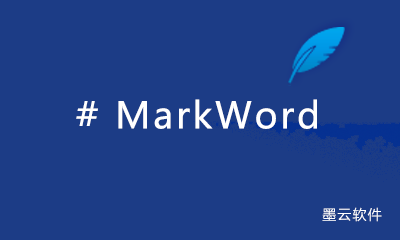
<style>
.page{position:relative;width:400px;height:240px;background:#1c3c86}
.page>*{position:absolute;margin:0}
.t1{font:36px "MicrosoftYaHei";letter-spacing:0.08em;color:#ffffff}
.t2{font:14px "MicrosoftYaHeiLight";letter-spacing:0.08em;color:#ffffff}
</style>
<div class="page">
<p class="t1" style="left:76px;top:99px;width:241px;height:30px"># MarkWord</p>
<p class="t2" style="left:322px;top:207px;width:60px;height:15px">墨云软件</p>
</div>
